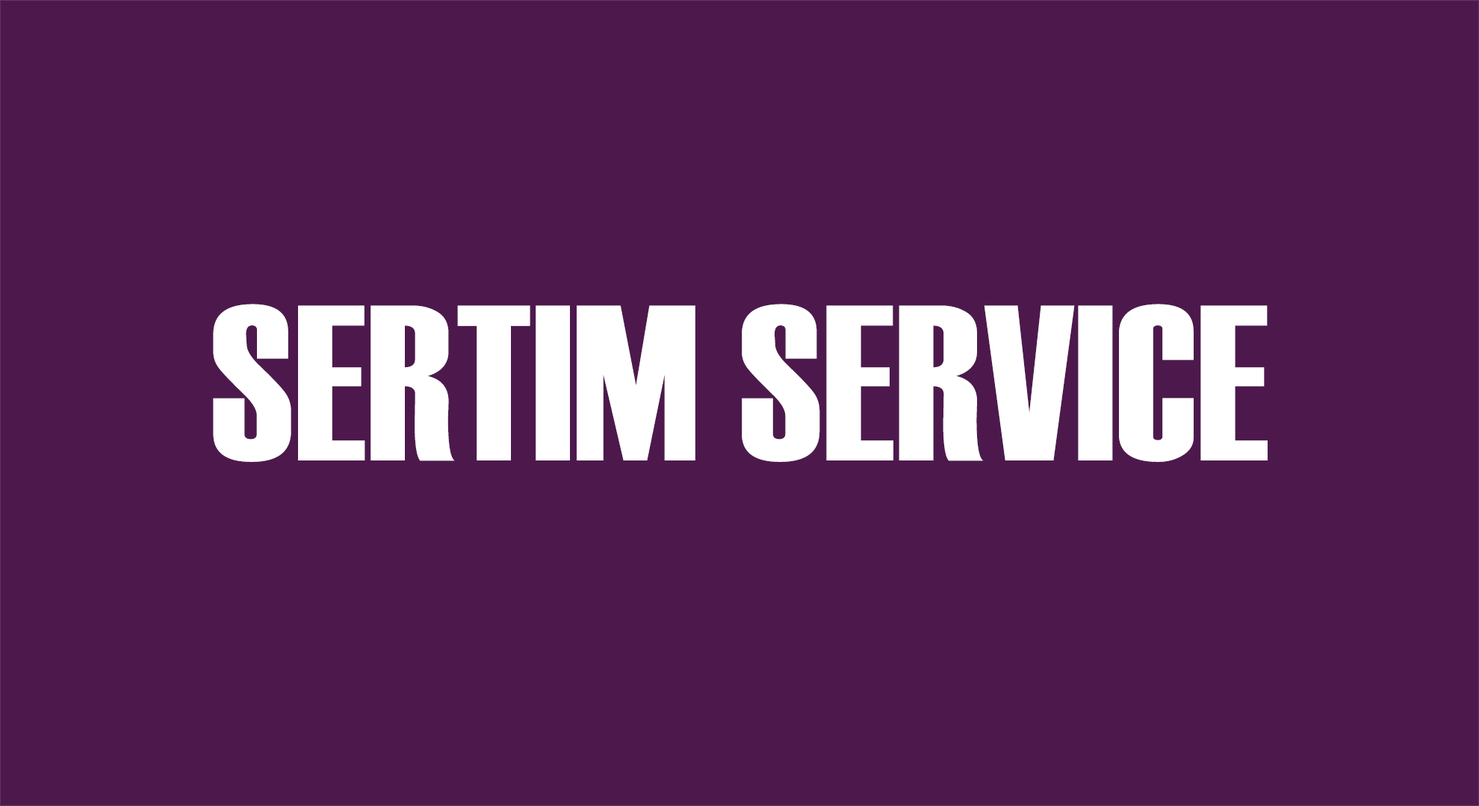
<style>
.page{position:relative;width:1479px;height:806px;background:#4d194d}
.page>*{position:absolute;margin:0}
.t1{font:221.1px "Haettenschweiler";color:#ffffff}
</style>
<div class="page">
<p class="t1" style="left:213px;top:304px;width:1054px;height:158px">SERTIM SERVICE</p>
</div>
